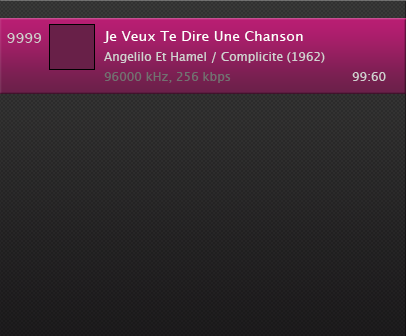
<style>
.page{position:relative;width:406px;height:336px}
.page>*{position:absolute;margin:0}
.t1{font:14px "LucidaGrande";color:#d1d1d1}
.t2{font:14px "LucidaGrande";color:#ffffff}
.t3{font:12px "LucidaGrande";color:#d1d1d1}
.t4{font:12px "LucidaGrande";color:#717171}
</style>
<div class="page">
<p class="t1" style="left:7px;top:33px;width:34px;height:10px">9999</p>
<p class="t2" style="left:103px;top:31px;width:200px;height:12px">Je Veux Te Dire Une Chanson</p>
<p class="t3" style="left:104px;top:52px;width:221px;height:11px">Angelilo Et Hamel / Complicite (1962)</p>
<p class="t4" style="left:104px;top:72px;width:127px;height:11px">96000 kHz, 256 kbps</p>
<p class="t3" style="left:352px;top:72px;width:34px;height:9px">99:60</p>
</div>
